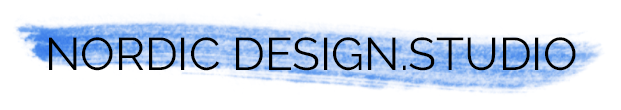
<style>
.page{position:relative;width:621px;height:110px;background:#ffffff}
.page>*{position:absolute;margin:0}
.t1{font:45.7px "Raleway-Regular";color:#000000;text-transform:uppercase}
</style>
<div class="page">
<p class="t1" style="left:49px;top:37px;width:527px;height:34px">nordic design.studio</p>
</div>
